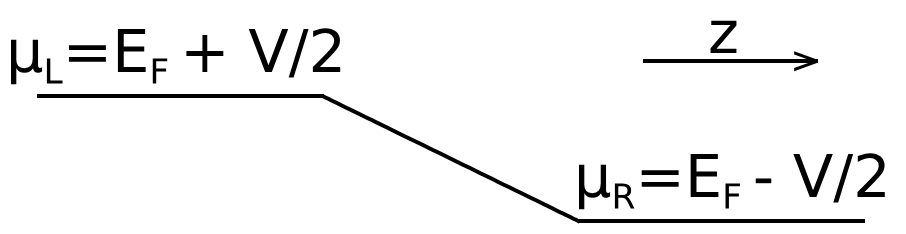
<style>
.page{position:relative;width:906px;height:234px;background:#ffffff}
.page>*{position:absolute;margin:0}
.t1{font:59px "DejaVuSans";color:#000000}
.t2{font:37.4px "DejaVuSans";color:#000000}
</style>
<div class="page">
<p class="t1" style="left:11px;top:28px;width:330px;height:57px">μL=EF + V/2</p>
<p class="t1" style="left:710px;top:20px;width:27px;height:33px">z</p>
<p class="t2" style="left:794px;top:51px;width:24px;height:21px">&gt;</p>
<p class="t1" style="left:579px;top:153px;width:306px;height:57px">μR=EF - V/2</p>
</div>
